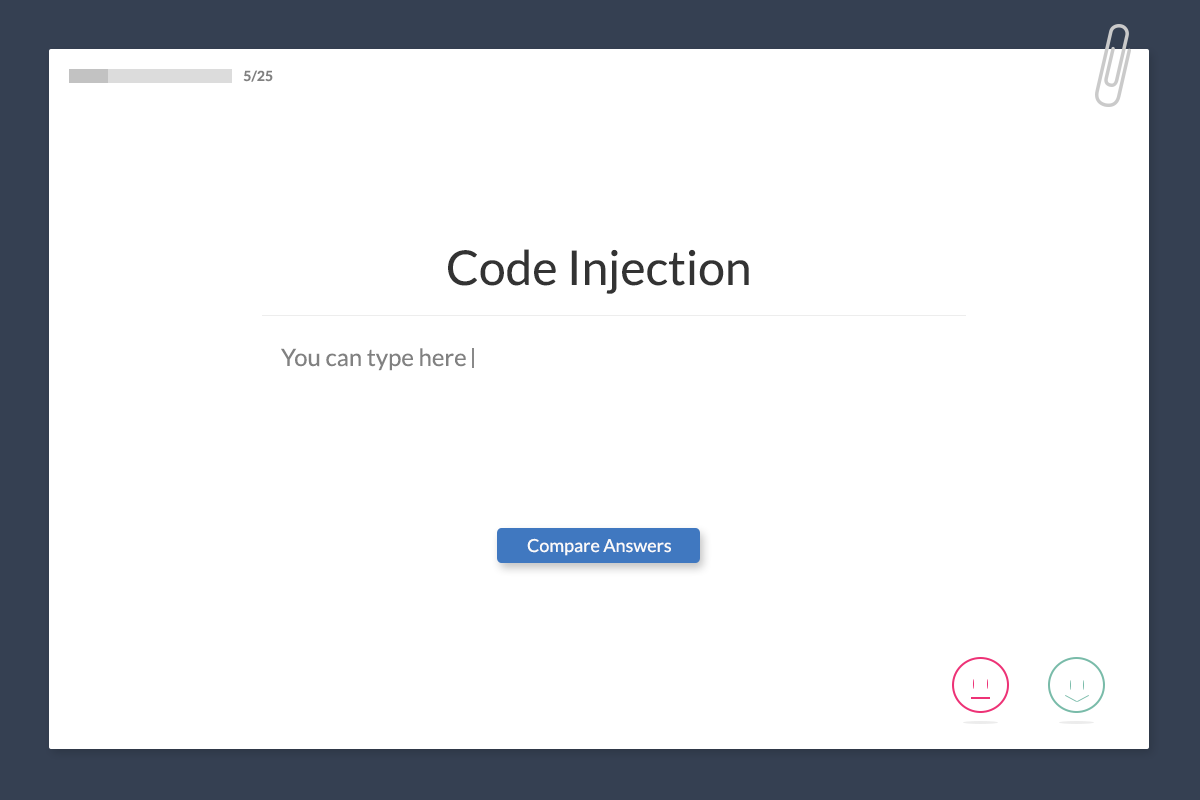
<style>
.page{position:relative;width:1200px;height:800px;background:#ffffff}
.page>*{position:absolute;margin:0}
.t1{font:14px "Lato-Bold";color:#818181}
.t2{font:48px "Lato-Regular";color:#333333}
.t3{font:24px "Lato-Regular";color:#818181}
.t4{font:18px "Lato-Regular";color:#fafafa}
</style>
<div class="page">
<p class="t1" style="left:243px;top:70px;width:30px;height:12px">5/25</p>
<p class="t2" style="left:448px;top:249px;width:301px;height:45px">Code Injection</p>
<p class="t3" style="left:281px;top:348px;width:185px;height:23px">You can type here</p>
<p class="t4" style="left:527px;top:538px;width:144px;height:18px">Compare Answers</p>
</div>
